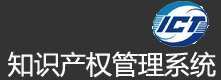
<style>
.page{position:relative;width:221px;height:80px;background:#333333}
.page>*{position:absolute;margin:0}
.t1{font:26px "MicrosoftYaHei";color:#fcf9f9}
</style>
<div class="page">
<p class="t1" style="left:8px;top:51px;width:208px;height:27px">知识产权管理系统</p>
</div>
